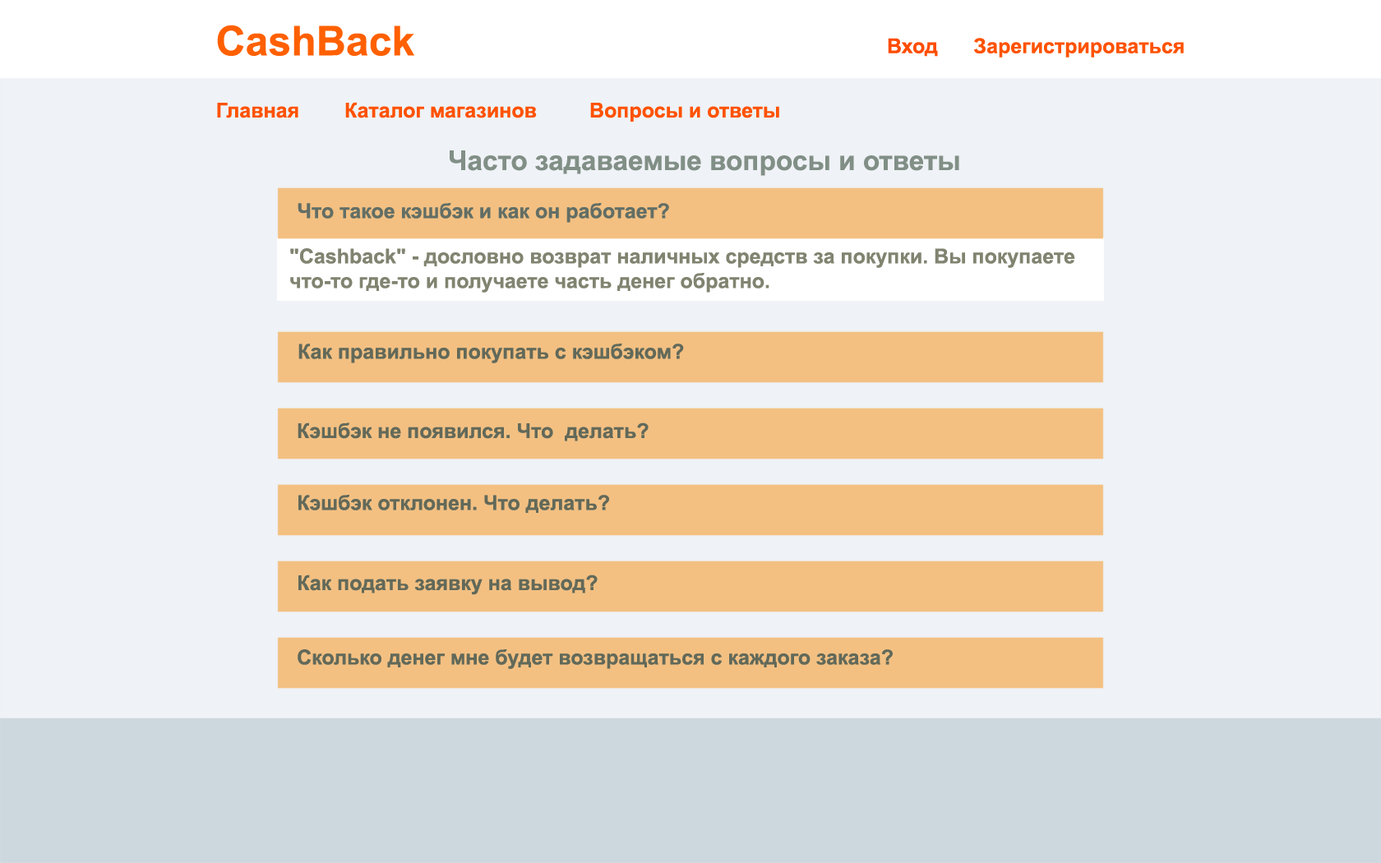
<style>
.page{position:relative;width:1381px;height:863px;background:#eff2f6}
.page>*{position:absolute;margin:0}
.t1{font:41.1px "Arial-BoldMT";color:#ff6000}
.t2{font:20.6px "Arial-BoldMT";color:#ff4c00}
.t3{font:20.6px "Arial-BoldMT";color:#ff5200}
.t4{font:27.4px "Arial-BoldMT";color:#818e86}
.t5{font:20.6px "Arial-BoldMT";color:#626e65}
.t6{font:27.4px "Arial-BoldMT";color:#626e65}
.t7{font:20.6px "Arial-BoldMT";color:#808471}
.t8{font:20.6px "Arial-BoldMT";color:#626959}
</style>
<div class="page">
<p class="t1" style="left:217px;top:25px;width:197px;height:31px">CashBack</p>
<p class="t2" style="left:888px;top:38px;width:50px;height:19px">Вход</p>
<p class="t3" style="left:974px;top:38px;width:210px;height:20px">Зарегистрироваться</p>
<p class="t3" style="left:345px;top:102px;width:192px;height:16px">Каталог магазинов</p>
<p class="t3" style="left:217px;top:103px;width:81px;height:15px">Главная</p>
<p class="t3" style="left:590px;top:103px;width:189px;height:19px">Вопросы и ответы</p>
<p class="t4" style="left:450px;top:150px;width:509px;height:26px">Часто задаваемые вопросы и ответы</p>
<p class="t5" style="left:298px;top:203px;width:371px;height:20px"><span class="t6"> </span>Что такое кэшбэк и как он работает?</p>
<p class="t7" style="left:290px;top:248px;width:785px;height:45px">"Cashback" - дословно возврат наличных средств за покупки. Вы покупаете      что-то где-то и получаете часть денег обратно.</p>
<p class="t8" style="left:298px;top:344px;width:386px;height:19px">Как правильно покупать с кэшбэком?</p>
<p class="t8" style="left:298px;top:423px;width:351px;height:19px">Кэшбэк не появился. Что  делать?</p>
<p class="t8" style="left:298px;top:495px;width:311px;height:18px">Кэшбэк отклонен. Что делать?</p>
<p class="t8" style="left:298px;top:575px;width:300px;height:20px">Как подать заявку на вывод?</p>
<p class="t8" style="left:298px;top:650px;width:595px;height:19px">Сколько денег мне будет возвращаться с каждого заказа?</p>
</div>
